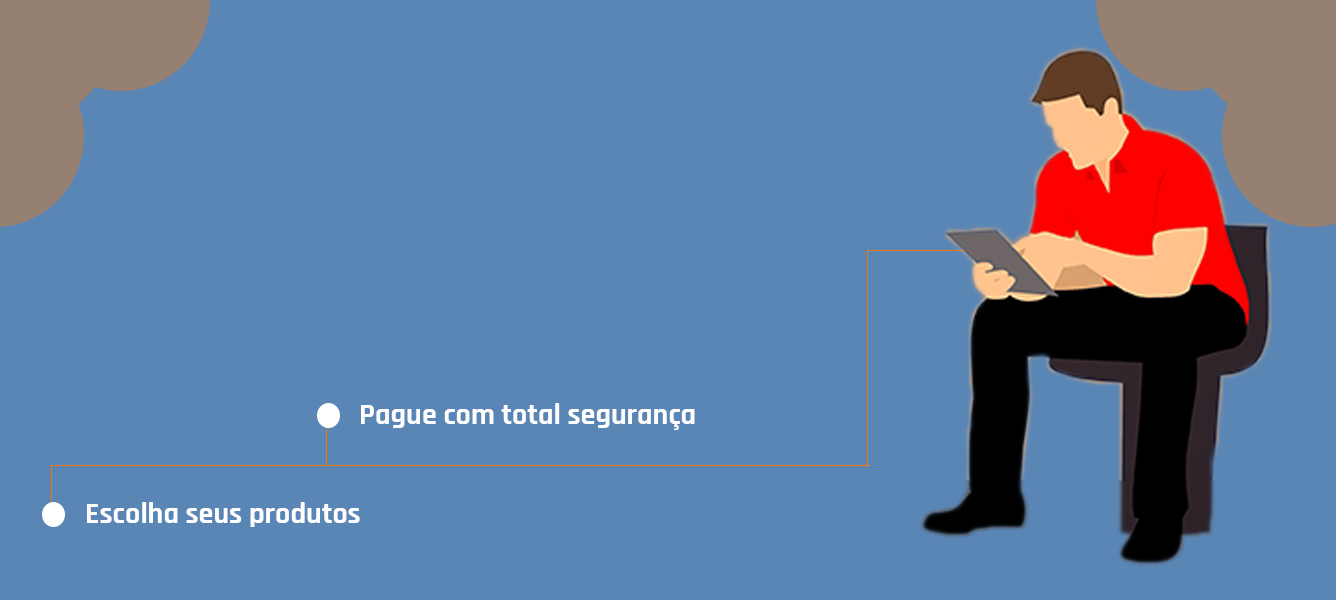
<style>
.page{position:relative;width:1336px;height:600px;background:#5a86b6}
.page>*{position:absolute;margin:0}
.t1{font:30px "Rajdhani-Bold";color:#fefefe}
</style>
<div class="page">
<p class="t1" style="left:361px;top:403px;width:334px;height:27px">Pague com total segurança</p>
<p class="t1" style="left:87px;top:502px;width:273px;height:25px">Escolha seus produtos</p>
</div>
